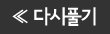
<style>
.page{position:relative;width:110px;height:34px;background:#333333}
.page>*{position:absolute;margin:0}
.t1{font:20px "SeoulNamsanEB";letter-spacing:-0.075em;color:#ffffff}
</style>
<div class="page">
<p class="t1" style="left:12px;top:9px;width:16px;height:15px;rotate:180deg">≫</p>
<p class="t1" style="left:34px;top:7px;width:62px;height:19px">다시풀기</p>
</div>
